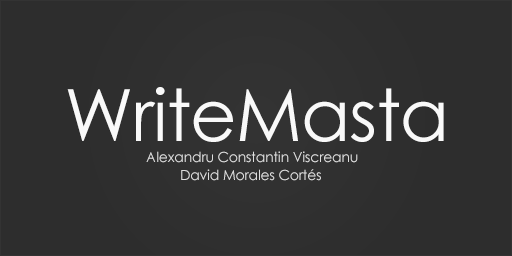
<style>
.page{position:relative;width:512px;height:256px;background:#2d2d2d}
.page>*{position:absolute;margin:0}
.t1{font:72px "CenturyGothic";letter-spacing:-0.013em;color:#f9f9f9}
.t2{font:14px "CenturyGothic";letter-spacing:-0.013em;color:#dedede}
</style>
<div class="page">
<p class="t1" style="left:67px;top:87px;width:377px;height:55px">WriteMasta</p>
<p class="t2" style="left:146px;top:151px;width:212px;height:12px">Alexandru Constantin Viscreanu</p>
<p class="t2" style="left:181px;top:169px;width:140px;height:12px">David Morales Cortés</p>
</div>
